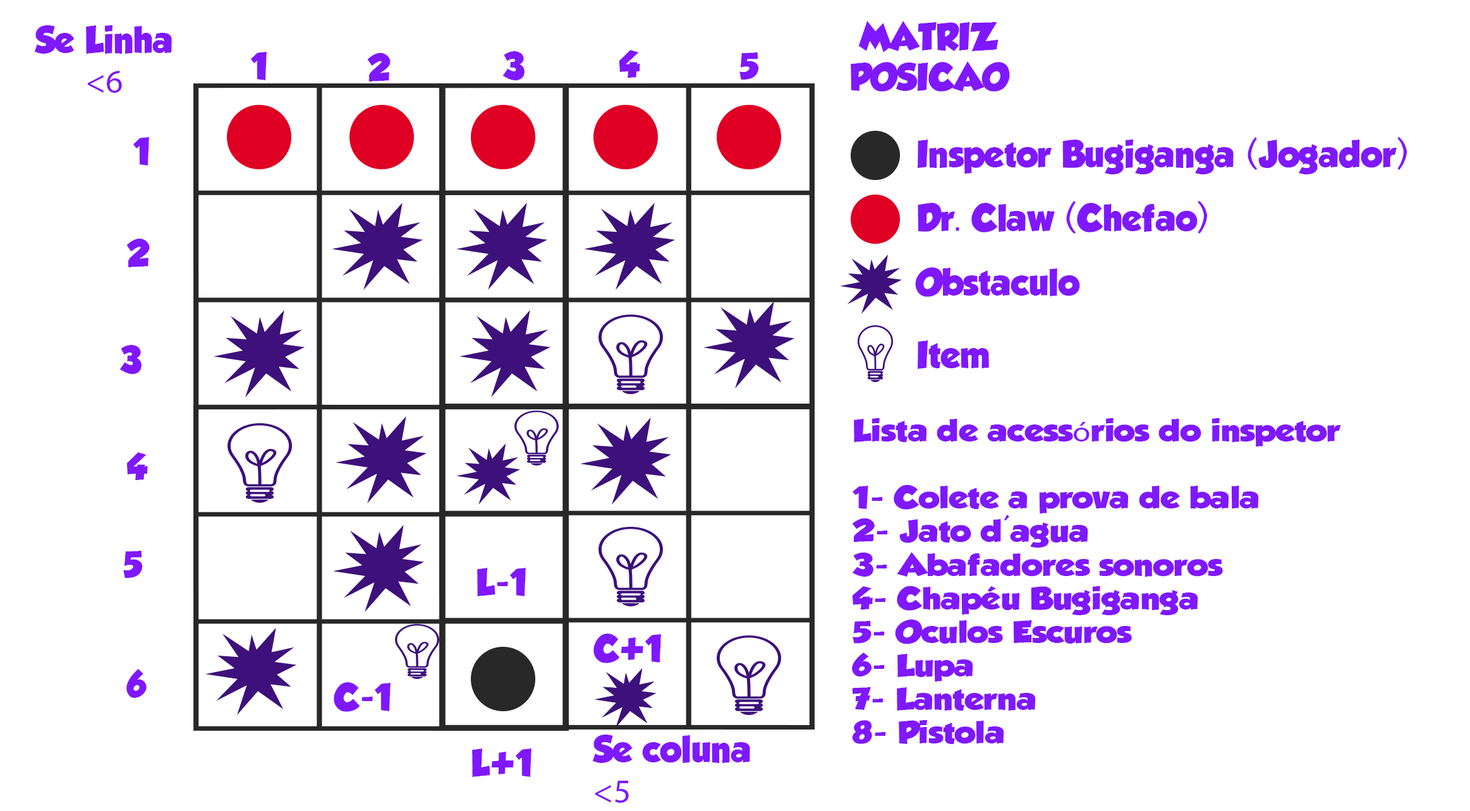
<style>
.page{position:relative;width:1470px;height:811px;background:#ffffff}
.page>*{position:absolute;margin:0}
.t1{font:33.6px "GROBOLD";color:#7f18ff}
.t2{font:33.6px "MyriadPro-Regular";color:#7f18ff}
.t3{font:28px "GROBOLD";color:#7f18ff;scale:1.17 1}
.t4{font:28px "MyriadPro-Regular";color:#7f18ff;scale:1.17 1}
</style>
<div class="page">
<p class="t1" style="left:34px;top:25px;width:138px;height:68px;text-align:center">Se Linha<br><span class="t2">&lt;6</span></p>
<p class="t1" style="left:851px;top:21px;width:159px;height:71px;text-align:center">MATRIZ<br>POSICAO</p>
<p class="t1" style="left:250px;top:52px;width:17px;height:28px">1</p>
<p class="t1" style="left:367px;top:52px;width:23px;height:30px">2</p>
<p class="t1" style="left:502px;top:51px;width:22px;height:30px">3</p>
<p class="t1" style="left:619px;top:50px;width:21px;height:28px">4</p>
<p class="t1" style="left:739px;top:52px;width:20px;height:28px">5</p>
<p class="t1" style="left:133px;top:137px;width:16px;height:29px">1</p>
<p class="t1" style="left:917px;top:137px;width:490px;height:37px">Inspetor Bugiganga (Jogador)</p>
<p class="t1" style="left:917px;top:201px;width:290px;height:33px">Dr. Claw (Chefao)</p>
<p class="t1" style="left:126px;top:238px;width:24px;height:29px">2</p>
<p class="t1" style="left:915px;top:267px;width:165px;height:30px">Obstaculo</p>
<p class="t1" style="left:917px;top:341px;width:72px;height:28px">Item</p>
<p class="t1" style="left:119px;top:345px;width:23px;height:30px">3</p>
<p class="t3" style="left:852px;top:418px;width:489px;height:326px">Lista de acess<span class="t4">ó</span>rios do inspetor<br><br>1- Colete a prova de bala<br>2- Jato d'agua<br>3- Abafadores sonoros<br>4- Chapéu Bugiganga<br>5- Oculos Escuros<br>6- Lupa<br>7- Lanterna<br>8- Pistola</p>
<p class="t1" style="left:126px;top:452px;width:22px;height:28px">4</p>
<p class="t1" style="left:123px;top:551px;width:20px;height:27px">5</p>
<p class="t1" style="left:477px;top:568px;width:49px;height:28px">L-1</p>
<p class="t1" style="left:593px;top:634px;width:68px;height:29px">C+1</p>
<p class="t1" style="left:126px;top:669px;width:21px;height:29px">6</p>
<p class="t1" style="left:334px;top:682px;width:56px;height:30px">C-1</p>
<p class="t1" style="left:592px;top:735px;width:158px;height:68px">Se coluna <br><span class="t2">&lt;5</span></p>
<p class="t1" style="left:472px;top:749px;width:59px;height:28px">L+1</p>
</div>
